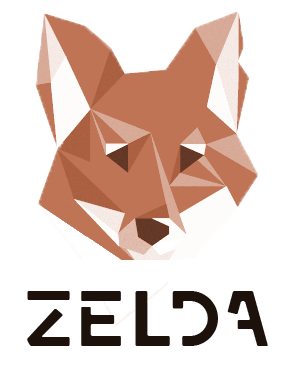
<style>
.page{position:relative;width:295px;height:376px;background:#ffffff}
.page>*{position:absolute;margin:0}
.t1{font:79px "LEIXO-DEMO";color:#1d110c}
</style>
<div class="page">
<p class="t1" style="left:27px;top:291px;width:241px;height:55px">ZELDA</p>
</div>
